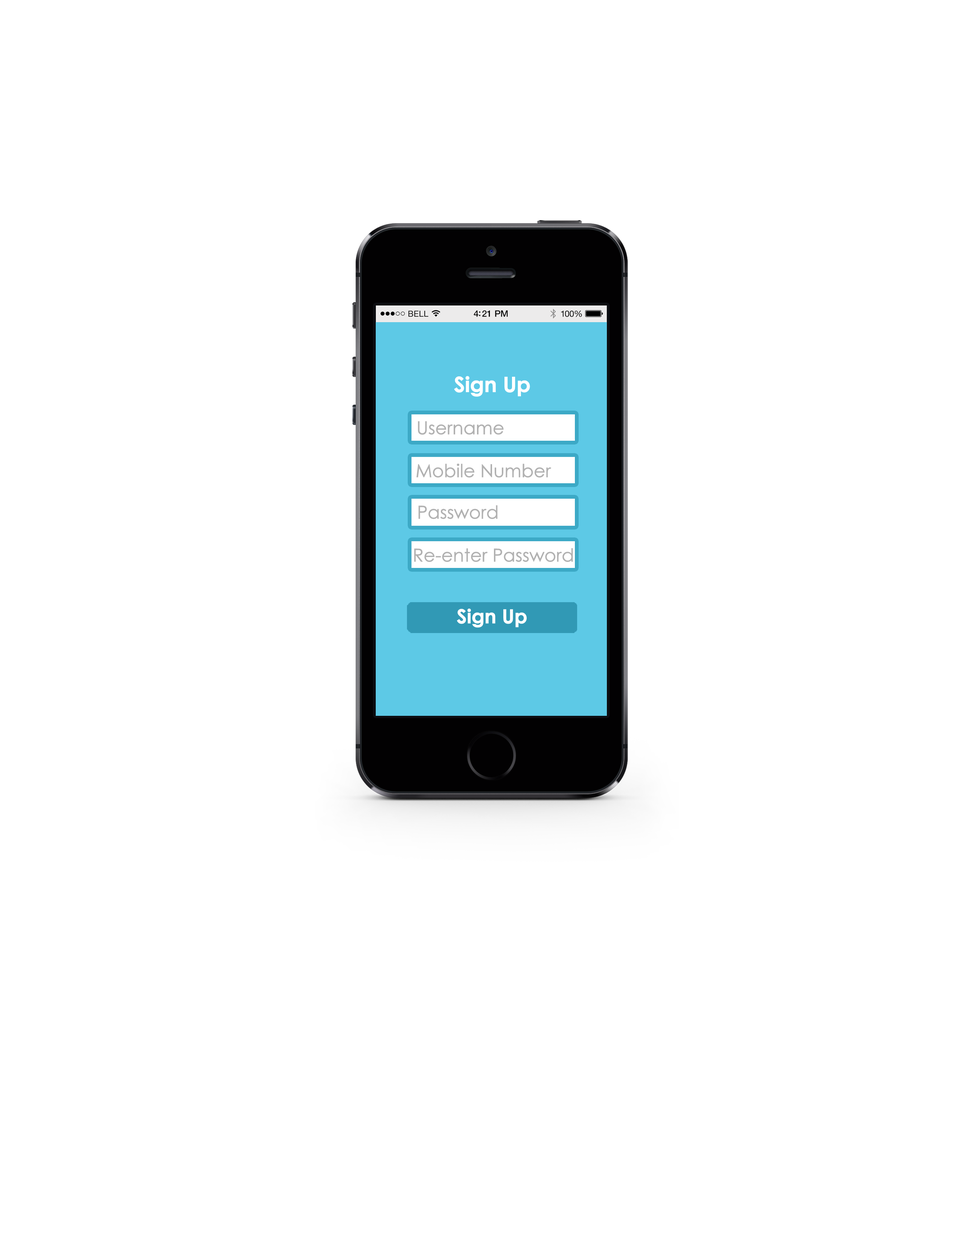
<style>
.page{position:relative;width:960px;height:1242px;background:#ffffff}
.page>*{position:absolute;margin:0}
.t1{font:21.3px "CenturyGothic-Bold";letter-spacing:-0.025em;color:#ffffff;font-weight:bold}
.t2{font:18px "CenturyGothic";letter-spacing:-0.025em;color:#b1b1b1;font-weight:bold}
.t3{font:19.6px "CenturyGothic-Bold";letter-spacing:-0.025em;color:#ffffff;font-weight:bold}
</style>
<div class="page">
<p class="t1" style="left:454px;top:376px;width:76px;height:21px">Sign Up</p>
<p class="t2" style="left:418px;top:421px;width:86px;height:14px">Username</p>
<p class="t2" style="left:416px;top:463px;width:135px;height:15px">Mobile Number</p>
<p class="t2" style="left:418px;top:505px;width:80px;height:14px">Password</p>
<p class="t2" style="left:414px;top:548px;width:159px;height:14px">Re-enter Password</p>
<p class="t3" style="left:457px;top:609px;width:70px;height:19px">Sign Up</p>
</div>
